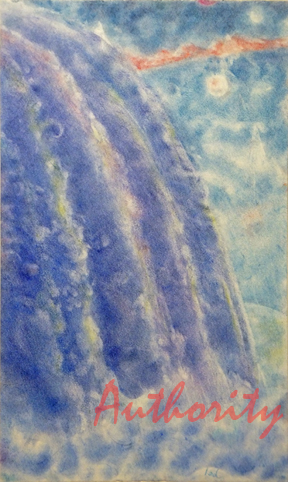
<style>
.page{position:relative;width:288px;height:482px}
.page>*{position:absolute;margin:0}
.t1{font:60px "Mistral";color:#cb6968}
</style>
<div class="page">
<p class="t1" style="left:93px;top:379px;width:191px;height:60px">Authority</p>
</div>
